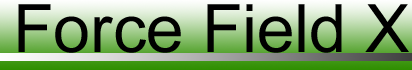
<style>
.page{position:relative;width:412px;height:70px}
.page>*{position:absolute;margin:0}
.t1{font:66.7px "ArialMT";color:#000000}
</style>
<div class="page">
<p class="t1" style="left:18px;top:4px;width:391px;height:49px">Force Field Xplorer</p>
</div>
